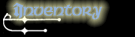
<style>
.page{position:relative;width:135px;height:37px;background:#000000}
.page>*{position:absolute;margin:0}
.t1{font:18px "Celtic-CondensedNormal";color:#94b2da}
.t2{font:18px "CathedralExtendedNormal";color:#94b2da}
</style>
<div class="page">
<p class="t1" style="left:13px;top:2px;width:89px;height:18px"><span class="t2">I</span>nventory</p>
</div>
